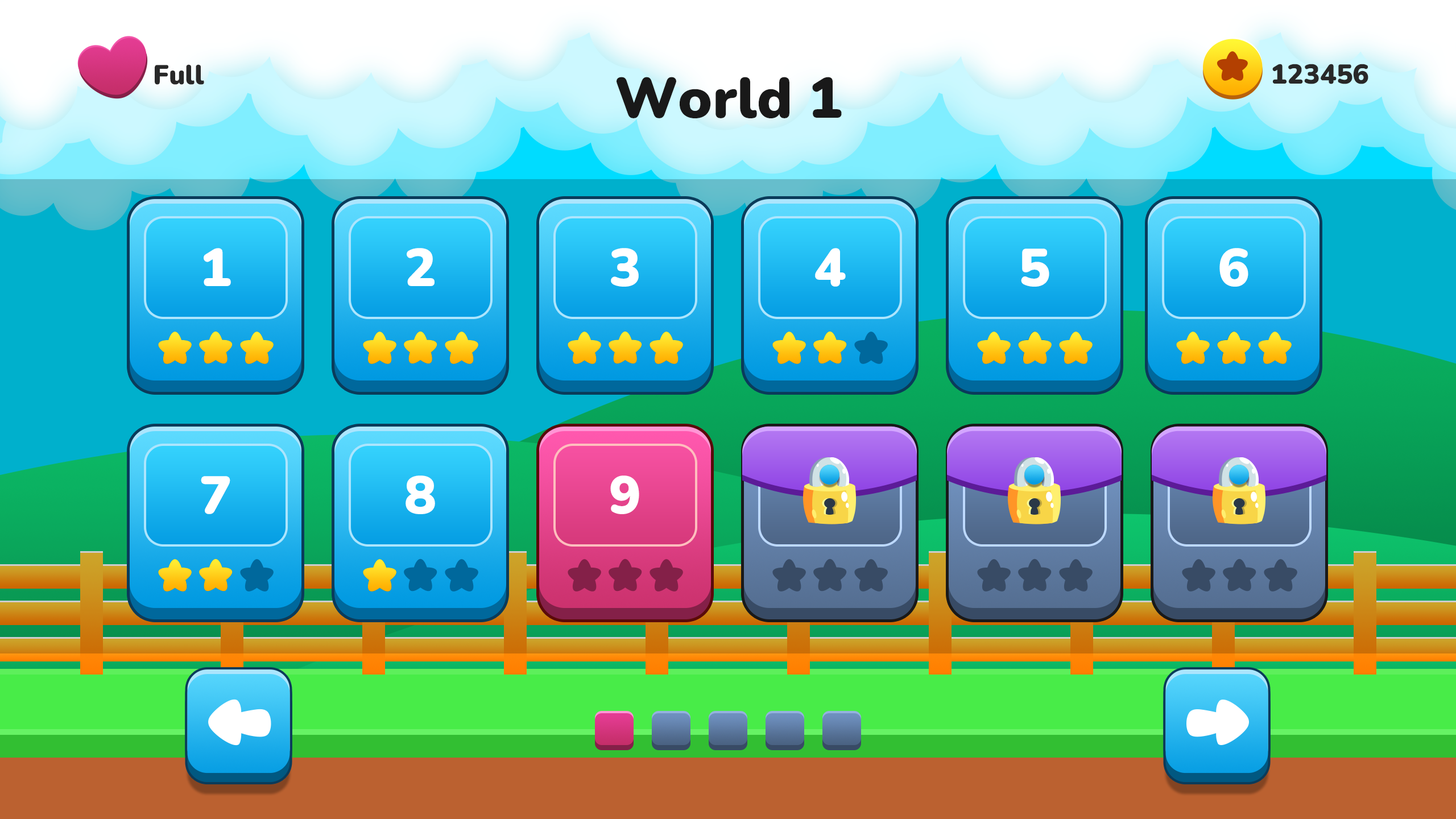
<style>
.page{position:relative;width:1456px;height:819px}
.page>*{position:absolute;margin:0}
.t1{font:27.3px "Nunito-Black";color:#282828}
.t2{font:56.9px "Nunito-Black";color:#191919}
.t3{font:53.1px "Nunito-Black";color:#ffffff}
</style>
<div class="page">
<p class="t1" style="left:155px;top:64px;width:49px;height:21px">Full</p>
<p class="t1" style="left:1272px;top:64px;width:96px;height:20px">123456</p>
<p class="t2" style="left:617px;top:77px;width:225px;height:41px">World 1</p>
<p class="t3" style="left:204px;top:248px;width:27px;height:38px">1</p>
<p class="t3" style="left:407px;top:248px;width:28px;height:38px">2</p>
<p class="t3" style="left:611px;top:248px;width:28px;height:39px">3</p>
<p class="t3" style="left:815px;top:248px;width:31px;height:39px">4</p>
<p class="t3" style="left:1021px;top:249px;width:28px;height:38px">5</p>
<p class="t3" style="left:1219px;top:248px;width:29px;height:39px">6</p>
<p class="t3" style="left:201px;top:476px;width:29px;height:38px">7</p>
<p class="t3" style="left:406px;top:475px;width:29px;height:39px">8</p>
<p class="t3" style="left:610px;top:475px;width:29px;height:39px">9</p>
</div>
